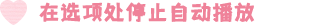
<style>
.page{position:relative;width:333px;height:25px;background:#ffffff}
.page>*{position:absolute;margin:0}
.t1{font:21.2px "shetumodengxiaofangti";color:#ef8299;font-weight:bold}
</style>
<div class="page">
<p class="t1" style="left:39px;top:2px;width:216px;height:20px">在选项处停止自动播放</p>
</div>
